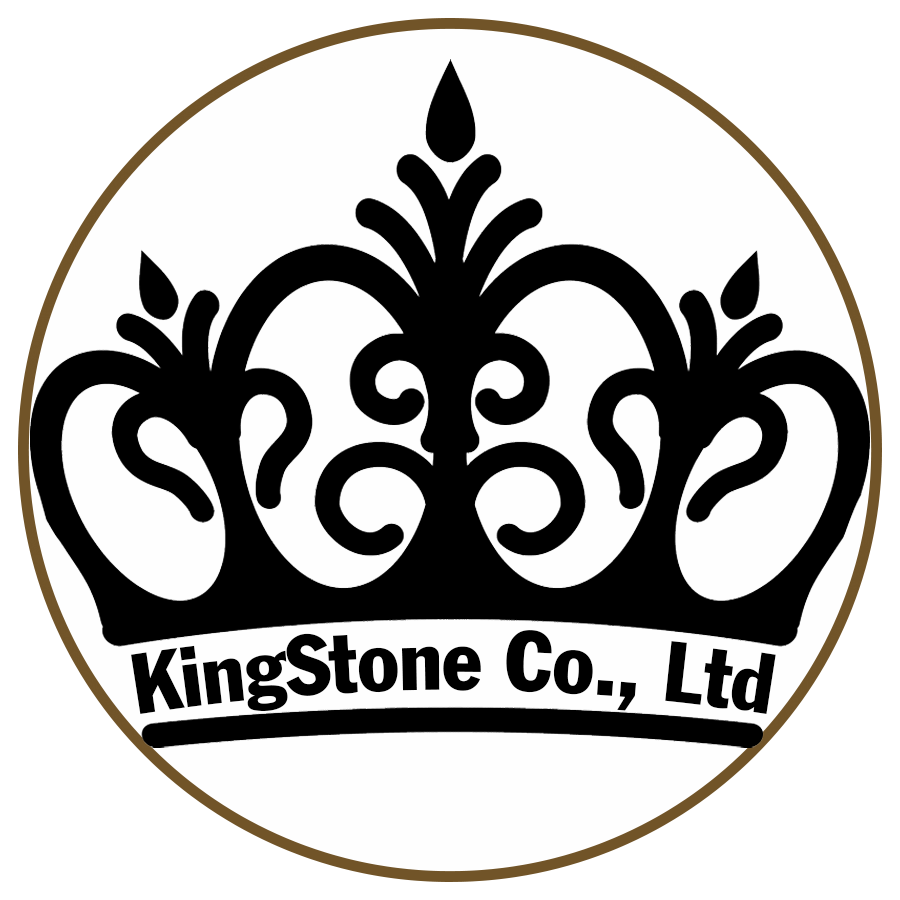
<style>
.page{position:relative;width:900px;height:900px;background:#fefefe}
.page>*{position:absolute;margin:0}
.t1{font:84px "FranklinGothicCondensed";color:#000000}
</style>
<div class="page">
<p class="t1" style="left:131px;top:630px;width:645px;height:84px">KingStone Co., Ltd</p>
</div>
